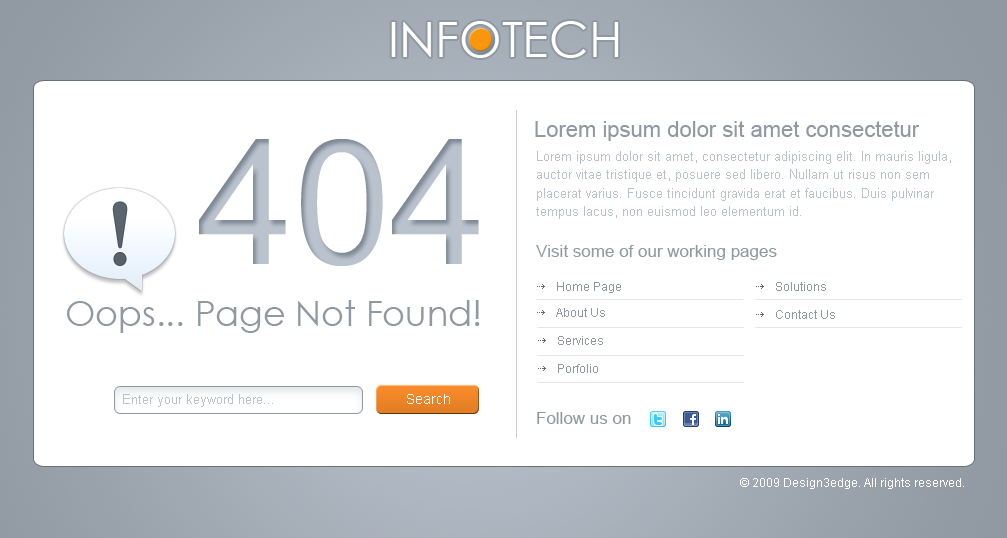
<style>
.page{position:relative;width:1007px;height:538px;background:#ffffff}
.page>*{position:absolute;margin:0}
.t1{font:49px "CenturyGothic";color:#ffffff}
.t2{font:22px "ArialMT";color:#9099a2}
.t3{font:174px "ArialMT";color:#bac2cd}
.t4{font:13px "ArialMT";color:#bac2cd}
.t5{font:17px "ArialMT";color:#9099a2}
.t6{font:12px "ArialMT";color:#9099a2}
.t7{font:35px "CenturyGothic";color:#9099a2}
.t8{font:14px "ArialMT";color:#ffffff}
.t9{font:12px "ArialMT";color:#ffffff}
</style>
<div class="page">
<p class="t1" style="left:391px;top:21px;width:228px;height:37px">INFOTECH</p>
<p class="t2" style="left:535px;top:121px;width:385px;height:20px">Lorem ipsum dolor sit amet consectetur</p>
<p class="t3" style="left:199px;top:139px;width:280px;height:127px">404</p>
<p class="t4" style="left:536px;top:151px;width:415px;height:68px">Lorem ipsum dolor sit amet, consectetur adipiscing elit. In mauris ligula, <br>auctor vitae tristique et, posuere sed libero. Nullam ut risus non sem <br>placerat varius. Fusce tincidunt gravida erat et faucibus. Duis pulvinar <br>tempus lacus, non euismod leo elementum id.</p>
<p class="t5" style="left:536px;top:245px;width:241px;height:15px">Visit some of our working pages</p>
<p class="t6" style="left:557px;top:282px;width:64px;height:11px">Home Page</p>
<p class="t6" style="left:776px;top:282px;width:50px;height:9px">Solutions</p>
<p class="t7" style="left:67px;top:300px;width:413px;height:33px">Oops... Page Not Found!</p>
<p class="t6" style="left:556px;top:308px;width:49px;height:9px">About Us</p>
<p class="t6" style="left:776px;top:310px;width:59px;height:9px">Contact Us</p>
<p class="t6" style="left:558px;top:336px;width:45px;height:9px">Services</p>
<p class="t6" style="left:558px;top:364px;width:40px;height:9px">Porfolio</p>
<p class="t4" style="left:123px;top:394px;width:150px;height:13px">Enter your keyword here...</p>
<p class="t8" style="left:407px;top:394px;width:43px;height:10px">Search</p>
<p class="t5" style="left:537px;top:412px;width:94px;height:12px">Follow us on</p>
<p class="t9" style="left:740px;top:478px;width:224px;height:11px">© 2009 Design3edge. All rights reserved.</p>
</div>
